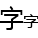
<style>
.page{position:relative;width:38px;height:38px;background:#ffffff}
.page>*{position:absolute;margin:0}
.t1{font:24px "MicrosoftYaHei";color:#000000}
.t2{font:16px "MicrosoftYaHei";color:#000000}
</style>
<div class="page">
<p class="t1" style="left:0px;top:6px;width:40px;height:24px">字<span class="t2">字</span></p>
</div>
